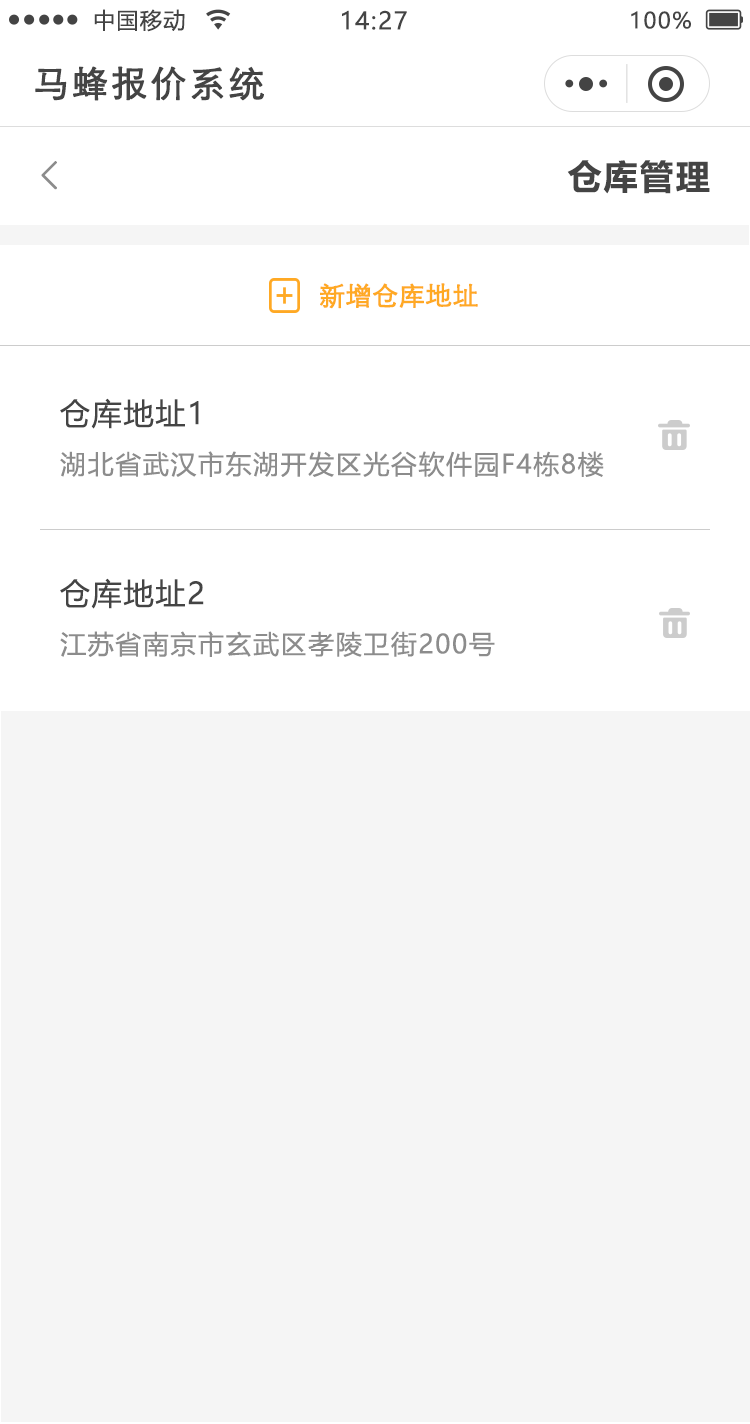
<style>
.page{position:relative;width:750px;height:1424px;background:#f5f5f5}
.page>*{position:absolute;margin:0}
.t1{font:22px "MicrosoftYaHei";letter-spacing:0.06em;color:#444444}
.t2{font:24px "MicrosoftYaHei";letter-spacing:0.06em;color:#444444}
.t3{font:36px "STXihei";letter-spacing:0.06em;color:#444444;font-weight:bold}
.t4{font:39.2px "FangSong";letter-spacing:0.1em;color:#8c8c8c;font-weight:bold}
.t5{font:34px "MicrosoftYaHeiUI-Bold";letter-spacing:0.06em;color:#444444}
.t6{font:26px "STXihei";color:#ffa924;font-weight:bold}
.t7{font:30px "MicrosoftYaHeiUI";letter-spacing:0.06em;color:#444444}
.t8{font:26px "MicrosoftYaHeiUI";letter-spacing:0.06em;color:#8c8c8c}
</style>
<div class="page">
<p class="t1" style="left:94px;top:9px;width:91px;height:23px">中国移动</p>
<p class="t2" style="left:342px;top:10px;width:65px;height:20px">14:27</p>
<p class="t1" style="left:631px;top:11px;width:60px;height:18px">100%</p>
<p class="t3" style="left:35px;top:66px;width:229px;height:35px">马蜂报价系统</p>
<p class="t4" style="left:41px;top:161px;width:16px;height:29px">&lt;</p>
<p class="t5" style="left:567px;top:160px;width:143px;height:34px">仓库管理</p>
<p class="t6" style="left:320px;top:283px;width:158px;height:26px">新增仓库地址</p>
<p class="t7" style="left:60px;top:398px;width:139px;height:31px">仓库地址1</p>
<p class="t8" style="left:60px;top:451px;width:544px;height:26px">湖北省武汉市东湖开发区光谷软件园F4栋8楼</p>
<p class="t7" style="left:60px;top:578px;width:144px;height:31px">仓库地址2</p>
<p class="t8" style="left:60px;top:631px;width:435px;height:26px">江苏省南京市玄武区孝陵卫街200号</p>
</div>
